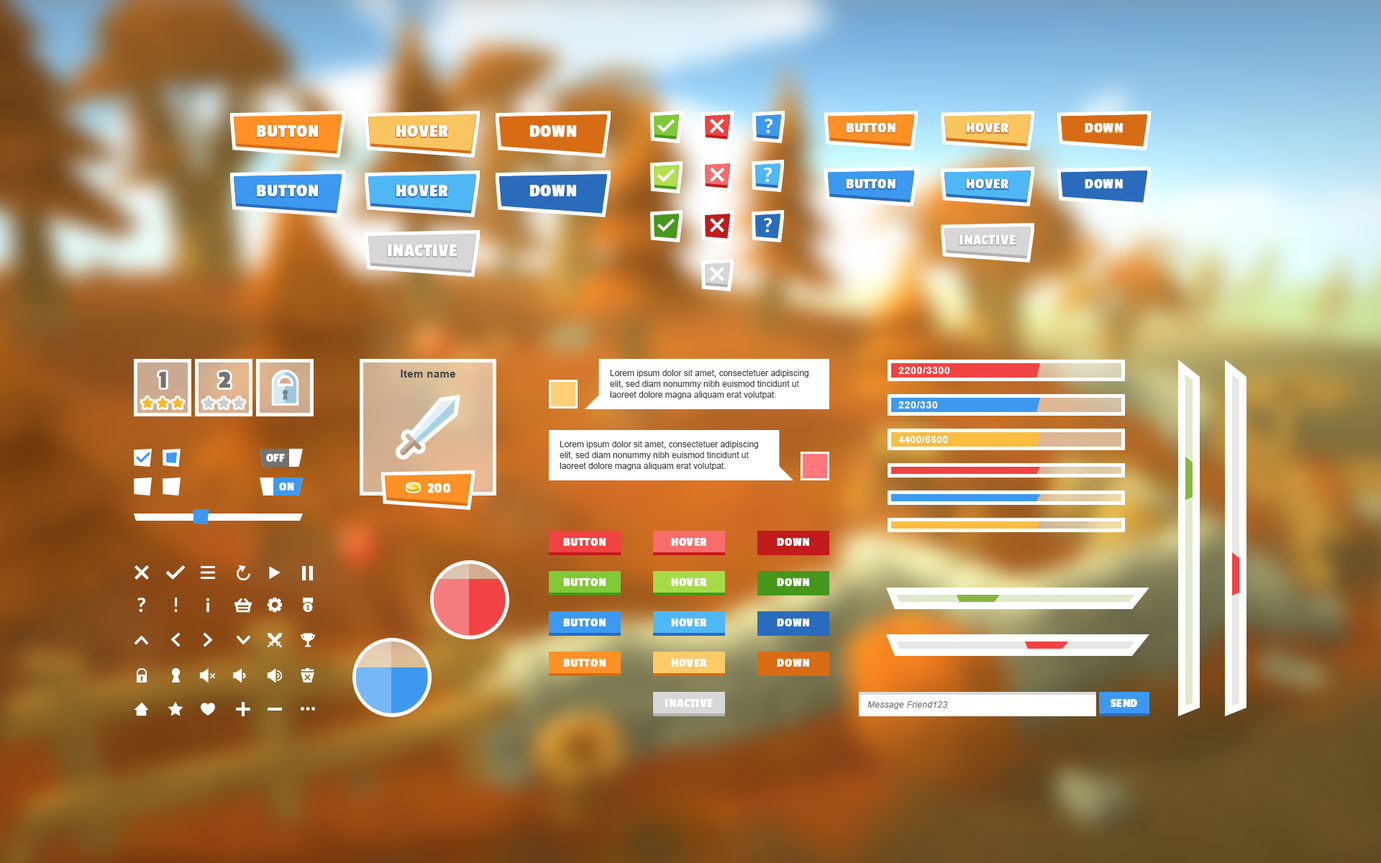
<style>
.page{position:relative;width:1381px;height:863px}
.page>*{position:absolute;margin:0}
.t1{font:18px "PassionOne-Bold";letter-spacing:0.025em;color:#ffffff;text-transform:uppercase}
.t2{font:14.4px "PassionOne-Bold";letter-spacing:0.025em;color:#ffffff;text-transform:uppercase}
.t3{font:25.2px "PassionOne-Bold";letter-spacing:0.025em;color:#727272;text-transform:uppercase}
.t4{font:10.8px "Arial-BoldMT";letter-spacing:0.025em;color:#454545}
.t5{font:8.6px/10.8px "ArialMT";color:#454545}
.t6{font:10.1px "Arial-BoldMT";letter-spacing:0.05em;color:#ffffff}
.t7{font:10.1px "Arial-BoldMT";letter-spacing:0.025em;color:#ffffff}
.t8{font:12.2px "PassionOne-Bold";letter-spacing:0.025em;color:#ffffff;text-transform:uppercase}
.t9{font:8.6px "Arial-ItalicMT";letter-spacing:0.025em;color:#ffffff}
</style>
<div class="page">
<p class="t1" style="left:257px;top:125px;width:61px;height:12px">Button</p>
<p class="t1" style="left:396px;top:125px;width:52px;height:12px">Hover</p>
<p class="t1" style="left:530px;top:125px;width:46px;height:12px">Down</p>
<p class="t2" style="left:846px;top:123px;width:50px;height:9px">Button</p>
<p class="t2" style="left:966px;top:123px;width:43px;height:9px">Hover</p>
<p class="t2" style="left:1085px;top:123px;width:38px;height:9px">Down</p>
<p class="t1" style="left:257px;top:185px;width:61px;height:11px">Button</p>
<p class="t1" style="left:396px;top:185px;width:52px;height:11px">Hover</p>
<p class="t1" style="left:530px;top:185px;width:46px;height:11px">Down</p>
<p class="t2" style="left:846px;top:179px;width:50px;height:9px">Button</p>
<p class="t2" style="left:966px;top:179px;width:43px;height:9px">Hover</p>
<p class="t2" style="left:1085px;top:179px;width:38px;height:9px">Down</p>
<p class="t1" style="left:388px;top:245px;width:70px;height:11px">Inactive</p>
<p class="t2" style="left:960px;top:235px;width:56px;height:10px">Inactive</p>
<p class="t3" style="left:159px;top:372px;width:7px;height:16px">1</p>
<p class="t3" style="left:219px;top:372px;width:11px;height:16px">2</p>
<p class="t4" style="left:401px;top:370px;width:55px;height:8px">Item name</p>
<p class="t5" style="left:610px;top:370px;width:199px;height:29px">Lorem ipsum dolor sit amet, consectetuer adipiscing elit, sed diam nonummy nibh euismod tincidunt ut laoreet dolore magna aliquam erat volutpat.</p>
<p class="t6" style="left:899px;top:367px;width:51px;height:7px">2200/3300</p>
<p class="t6" style="left:899px;top:401px;width:39px;height:8px">220/330</p>
<p class="t7" style="left:899px;top:436px;width:49px;height:7px">4400/6600</p>
<p class="t5" style="left:560px;top:441px;width:198px;height:29px">Lorem ipsum dolor sit amet, consectetuer adipiscing elit, sed diam nonummy nibh euismod tincidunt ut laoreet dolore magna aliquam erat volutpat.</p>
<p class="t8" style="left:266px;top:454px;width:19px;height:8px">Off</p>
<p class="t8" style="left:279px;top:483px;width:15px;height:8px">On</p>
<p class="t2" style="left:427px;top:483px;width:23px;height:10px">200</p>
<p class="t8" style="left:563px;top:538px;width:43px;height:8px">Button</p>
<p class="t8" style="left:671px;top:538px;width:36px;height:8px">Hover</p>
<p class="t8" style="left:777px;top:538px;width:32px;height:8px">Down</p>
<p class="t8" style="left:563px;top:578px;width:43px;height:8px">Button</p>
<p class="t8" style="left:671px;top:578px;width:36px;height:8px">Hover</p>
<p class="t8" style="left:777px;top:578px;width:32px;height:8px">Down</p>
<p class="t8" style="left:563px;top:619px;width:43px;height:8px">Button</p>
<p class="t8" style="left:671px;top:619px;width:36px;height:8px">Hover</p>
<p class="t8" style="left:777px;top:619px;width:32px;height:8px">Down</p>
<p class="t8" style="left:563px;top:659px;width:43px;height:8px">Button</p>
<p class="t8" style="left:671px;top:659px;width:36px;height:8px">Hover</p>
<p class="t8" style="left:777px;top:659px;width:32px;height:8px">Down</p>
<p class="t9" style="left:868px;top:701px;width:79px;height:8px">Message Friend123</p>
<p class="t8" style="left:1111px;top:699px;width:26px;height:8px">Send</p>
</div>
